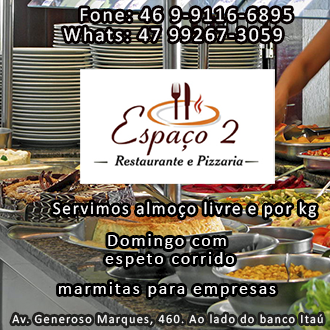
<style>
.page{position:relative;width:330px;height:330px}
.page>*{position:absolute;margin:0}
.t1{font:19.8px/19.8px "Calibri";letter-spacing:0.1em;color:#fcfbfb}
.t2{font:17.8px "Calibri";letter-spacing:0.1em;color:#fcfbfb;scale:0.97 1}
.t3{font:18px/18px "Calibri";letter-spacing:0.1em;color:#fcfbfb}
.t4{font:18px "Calibri";letter-spacing:0.1em;color:#fcfbfb}
.t5{font:12.4px "Calibri";letter-spacing:0.1em;color:#fcfbfb}
</style>
<div class="page">
<p class="t1" style="left:63px;top:8px;width:229px;height:34px;text-align:center">Fone: 46 9-9116-6895<br>Whats: 47 99267-3059</p>
<p class="t2" style="left:53px;top:201px;width:263px;height:17px">Servimos almoço livre e por kg</p>
<p class="t3" style="left:105px;top:234px;width:129px;height:33px;text-align:center">Domingo com<br> espeto corrido</p>
<p class="t4" style="left:59px;top:282px;width:217px;height:15px">marmitas para empresas</p>
<p class="t5" style="left:12px;top:314px;width:311px;height:12px">Av. Generoso Marques, 460. Ao lado do banco Itaú</p>
</div>
